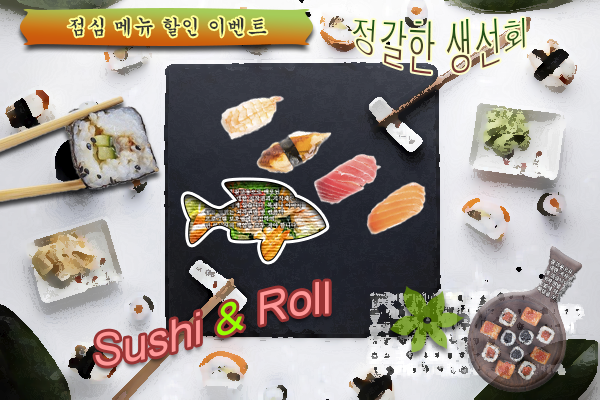
<style>
.page{position:relative;width:600px;height:400px}
.page>*{position:absolute;margin:0}
.t1{font:20px "Gungsuh";color:#333333}
.t2{font:28px/60px "Dotum"}
</style>
<div class="page">
<p class="t1" style="left:68px;top:17px;width:199px;height:20px">점심 메뉴 할인 이벤트</p>
<p class="t2" style="left:352px;top:17px;width:173px;height:58px;text-align:center">정갈한 생선회</p>
</div>
